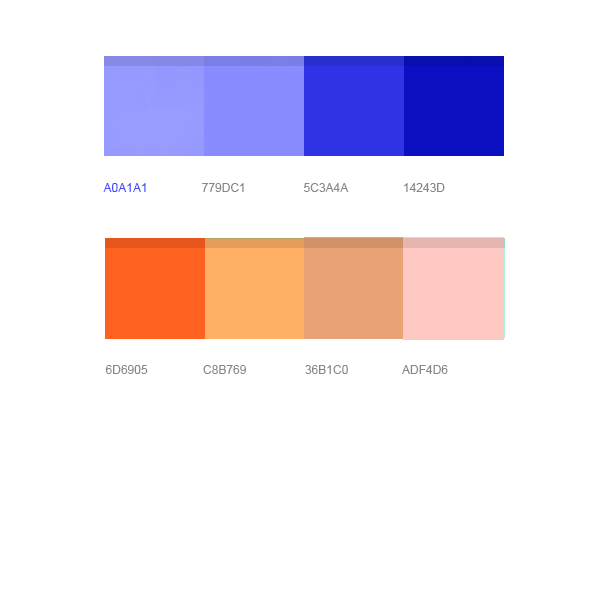
<style>
.page{position:relative;width:600px;height:600px;background:#ffffff}
.page>*{position:absolute;margin:0}
.t1{font:12px "ArialMT";color:#474dff;text-transform:uppercase}
.t2{font:12px "ArialMT";color:#878787;text-transform:uppercase}
</style>
<div class="page">
<p class="t1" style="left:103px;top:183px;width:43px;height:9px">a0a1a1</p>
<p class="t2" style="left:202px;top:183px;width:42px;height:9px">779dc1</p>
<p class="t2" style="left:303px;top:183px;width:46px;height:9px">5c3a4a</p>
<p class="t2" style="left:404px;top:183px;width:41px;height:9px">14243d</p>
<p class="t2" style="left:105px;top:365px;width:43px;height:9px">6d6905</p>
<p class="t2" style="left:203px;top:365px;width:43px;height:9px">c8b769</p>
<p class="t2" style="left:305px;top:365px;width:43px;height:9px">36b1c0</p>
<p class="t2" style="left:402px;top:365px;width:46px;height:9px">adf4d6</p>
</div>
